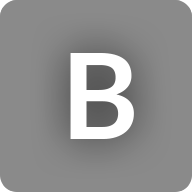
<style>
.page{position:relative;width:192px;height:192px;background:#8a8a8a}
.page>*{position:absolute;margin:0}
.t1{font:117.8px "Lato-Bold";color:#ffffff}
</style>
<div class="page">
<p class="t1" style="left:70px;top:53px;width:64px;height:86px">B</p>
</div>
